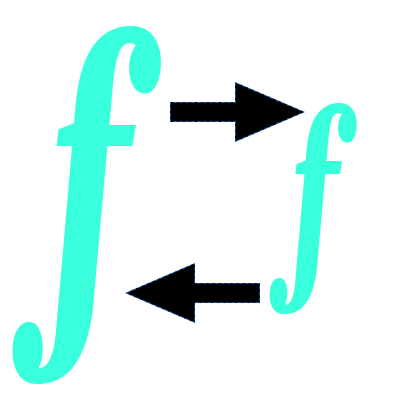
<style>
.page{position:relative;width:403px;height:403px;background:#ffffff}
.page>*{position:absolute;margin:0}
.t1{font:395.8px "AirNewzald-BlackItalic";color:#3affdc;scale:0.55 1}
.t2{font:232.7px "AirNewzald-BlackItalic";color:#3affdc;scale:0.55 1}
</style>
<div class="page">
<p class="t1" style="left:12px;top:26px;width:149px;height:358px">f</p>
<p class="t2" style="left:269px;top:103px;width:88px;height:211px">f</p>
</div>
